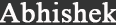
<style>
.page{position:relative;width:116px;height:25px;background:#333333}
.page>*{position:absolute;margin:0}
.t1{font:29.3px "TimesNewRomanPSMT";color:#fefbfb;font-weight:bold}
</style>
<div class="page">
<p class="t1" style="left:0px;top:2px;width:118px;height:21px">Abhishek</p>
</div>
